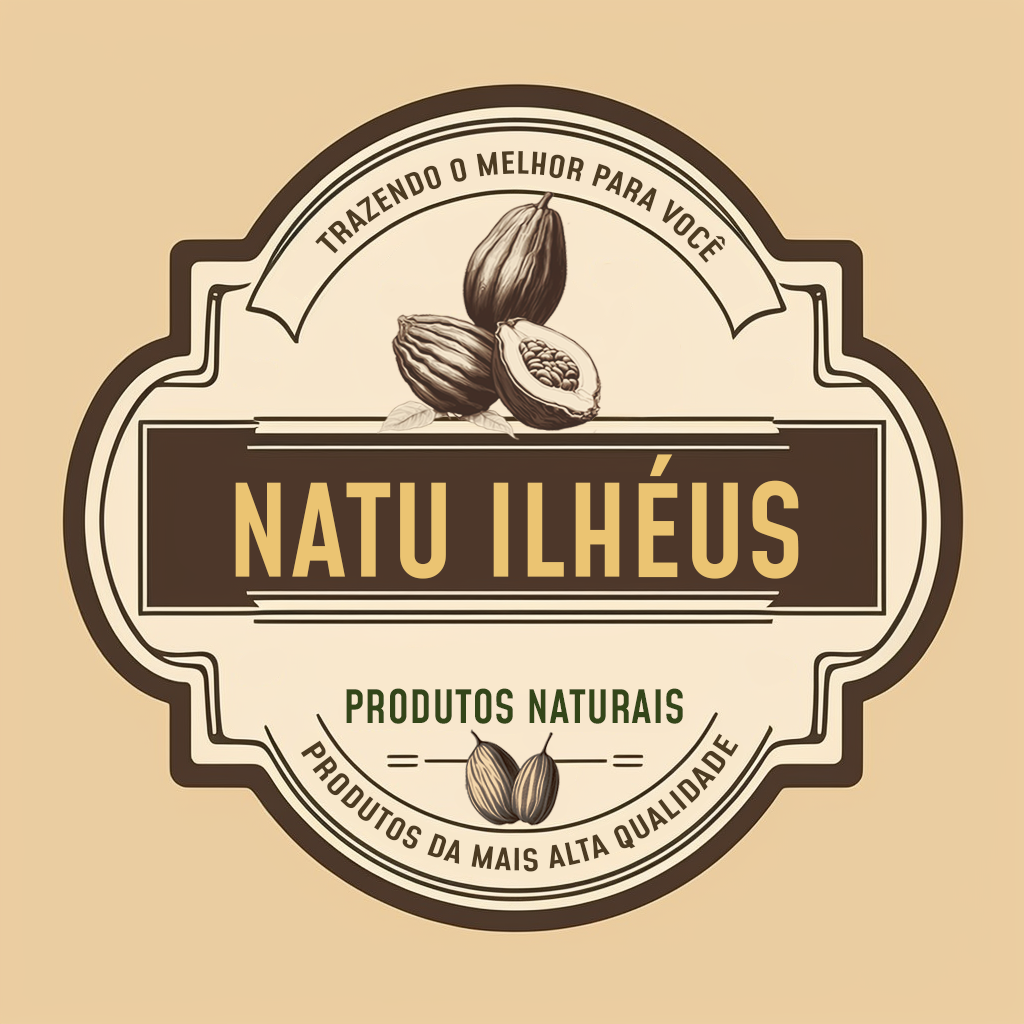
<style>
.page{position:relative;width:1024px;height:1024px;background:#eacda1}
.page>*{position:absolute;margin:0}
.t1{font:30px "Mohave-SemiBold";color:#4c3b22}
.t2{font:125px "Mohave-SemiBold";color:#ebc472}
.t3{font:45px "Mohave-SemiBold";color:#344619}
</style>
<div class="page">
<p class="t1" style="left:315px;top:151px;width:410px;height:112px">TRAZENDO O MELHOR PARA VOCÊ</p>
<p class="t2" style="left:235px;top:454px;width:564px;height:125px">NATU ILHÉUS</p>
<p class="t3" style="left:346px;top:688px;width:337px;height:36px">PRODUTOS NATURAIS</p>
<p class="t1" style="left:300px;top:733px;width:439px;height:139px">PRODUTOS DA MAIS ALTA QUALIDADE</p>
</div>
